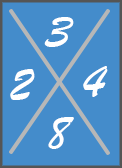
<style>
.page{position:relative;width:122px;height:168px;background:#448ccb}
.page>*{position:absolute;margin:0}
.t1{font:50px "BrushScriptMT";color:#ffffff}
</style>
<div class="page">
<p class="t1" style="left:44px;top:17px;width:30px;height:30px">3</p>
<p class="t1" style="left:10px;top:69px;width:25px;height:31px">2</p>
<p class="t1" style="left:83px;top:66px;width:25px;height:31px">4</p>
<p class="t1" style="left:48px;top:117px;width:26px;height:32px">8</p>
</div>
